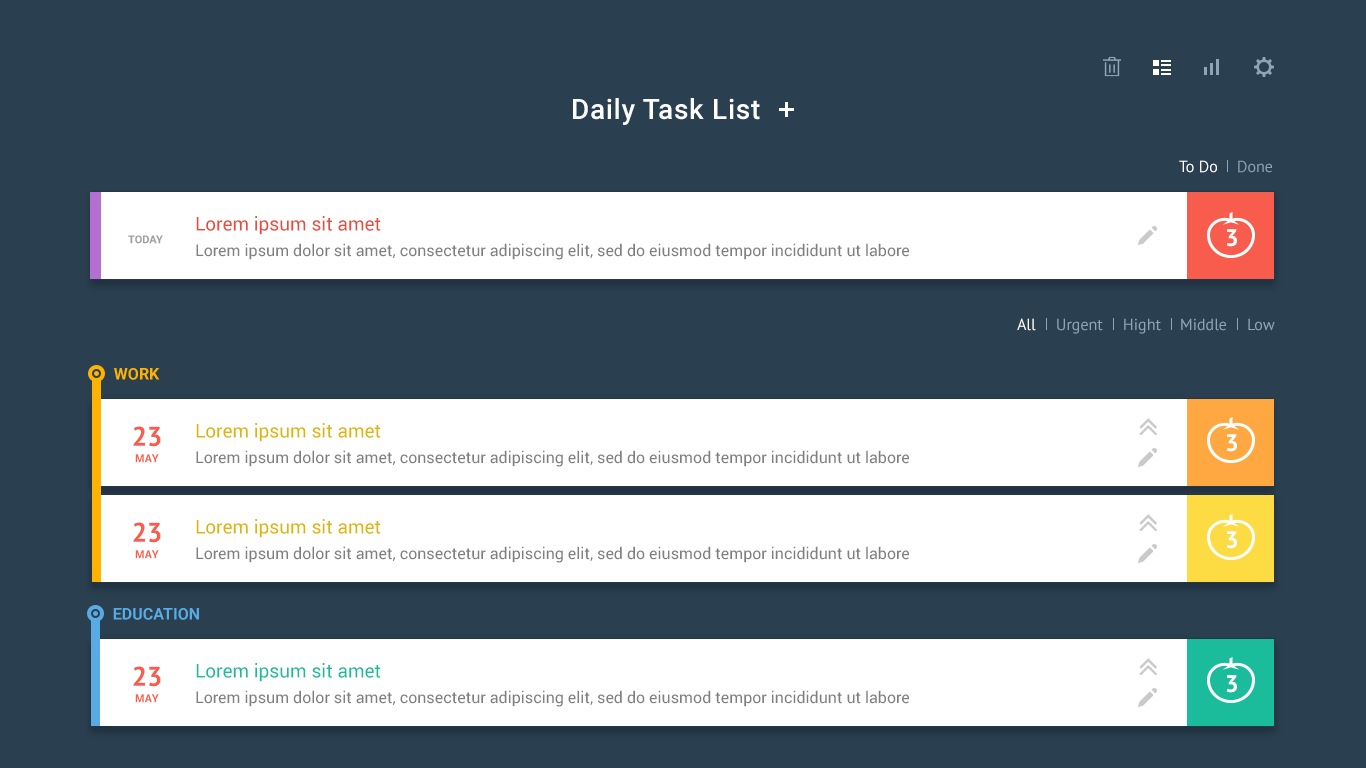
<style>
.page{position:relative;width:1366px;height:768px;background:#2a3f50}
.page>*{position:absolute;margin:0}
.t1{font:28px "Roboto-Medium";letter-spacing:0.025em;color:#ffffff}
.t2{font:16px "PTSans-Regular";color:#ffffff}
.t3{font:16px "PTSans-Regular";color:#8aa2b5}
.t4{font:19px "Roboto-Regular";color:#e74c3c}
.t5{font:24px "PTSans-Bold";color:#ffffff}
.t6{font:11px "Roboto-Bold";color:#9f9f9f}
.t7{font:16px "Roboto-Regular";color:#7f7f7f}
.t8{font:16px "PTSans-Regular";color:#8ea5b8}
.t9{font:16px "Roboto-Bold";color:#ffb200;text-transform:uppercase}
.t10{font:19px "Roboto-Regular";color:#dfb500}
.t11{font:27px "PTSans-Bold";color:#f75c4c}
.t12{font:11px "Roboto-Bold";color:#f75c4c}
.t13{font:16px "Roboto-Bold";color:#59abe3;text-transform:uppercase}
.t14{font:19px "Roboto-Regular";color:#1abc9c}
</style>
<div class="page">
<p class="t1" style="left:573px;top:98px;width:187px;height:27px">Daily Task List</p>
<p class="t2" style="left:1179px;top:160px;width:38px;height:13px">To Do</p>
<p class="t3" style="left:1238px;top:160px;width:34px;height:13px">Done</p>
<p class="t4" style="left:196px;top:216px;width:185px;height:19px">Lorem ipsum sit amet</p>
<p class="t5" style="left:1226px;top:229px;width:11px;height:18px">3</p>
<p class="t6" style="left:128px;top:235px;width:35px;height:9px">TODAY</p>
<p class="t7" style="left:196px;top:243px;width:713px;height:17px">Lorem ipsum dolor sit amet, consectetur adipiscing elit, sed do eiusmod tempor incididunt ut labore</p>
<p class="t2" style="left:1017px;top:318px;width:19px;height:13px">All</p>
<p class="t8" style="left:1057px;top:318px;width:46px;height:16px">Urgent</p>
<p class="t8" style="left:1124px;top:318px;width:37px;height:16px">Hight</p>
<p class="t8" style="left:1181px;top:318px;width:45px;height:13px">Middle</p>
<p class="t8" style="left:1248px;top:318px;width:27px;height:13px">Low</p>
<p class="t9" style="left:114px;top:368px;width:46px;height:12px">Work</p>
<p class="t10" style="left:196px;top:423px;width:185px;height:19px">Lorem ipsum sit amet</p>
<p class="t11" style="left:133px;top:426px;width:28px;height:21px">23</p>
<p class="t5" style="left:1226px;top:434px;width:11px;height:18px">3</p>
<p class="t12" style="left:135px;top:454px;width:24px;height:9px">MAY</p>
<p class="t7" style="left:196px;top:450px;width:713px;height:17px">Lorem ipsum dolor sit amet, consectetur adipiscing elit, sed do eiusmod tempor incididunt ut labore</p>
<p class="t10" style="left:196px;top:519px;width:185px;height:19px">Lorem ipsum sit amet</p>
<p class="t11" style="left:133px;top:522px;width:28px;height:21px">23</p>
<p class="t5" style="left:1226px;top:531px;width:11px;height:18px">3</p>
<p class="t12" style="left:135px;top:550px;width:24px;height:9px">MAY</p>
<p class="t7" style="left:196px;top:546px;width:713px;height:17px">Lorem ipsum dolor sit amet, consectetur adipiscing elit, sed do eiusmod tempor incididunt ut labore</p>
<p class="t13" style="left:113px;top:608px;width:86px;height:12px">Education</p>
<p class="t14" style="left:196px;top:663px;width:185px;height:19px">Lorem ipsum sit amet</p>
<p class="t11" style="left:133px;top:666px;width:28px;height:21px">23</p>
<p class="t5" style="left:1226px;top:675px;width:11px;height:18px">3</p>
<p class="t12" style="left:135px;top:694px;width:24px;height:9px">MAY</p>
<p class="t7" style="left:196px;top:690px;width:713px;height:17px">Lorem ipsum dolor sit amet, consectetur adipiscing elit, sed do eiusmod tempor incididunt ut labore</p>
</div>
